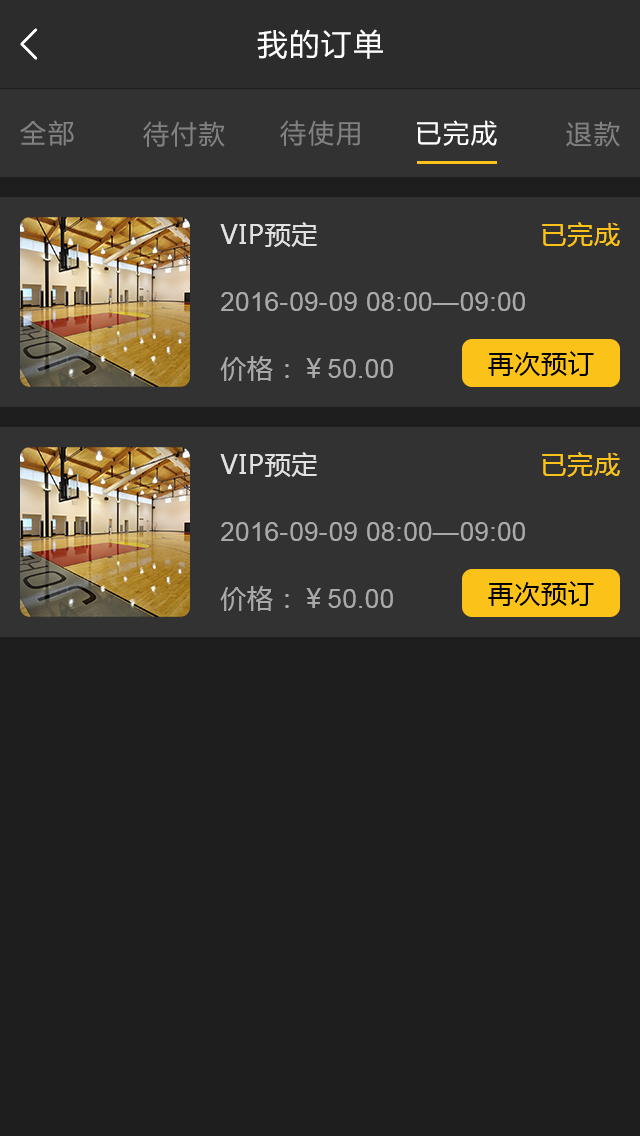
<style>
.page{position:relative;width:640px;height:1136px;background:#1e1e1e}
.page>*{position:absolute;margin:0}
.t1{font:30px "MicrosoftYaHei";letter-spacing:0.07em;color:#ffffff}
.t2{font:26px "MicrosoftYaHei";letter-spacing:0.07em;color:#818181}
.t3{font:26px "MicrosoftYaHei";letter-spacing:0.07em;color:#ffffff}
.t4{font:26px "MicrosoftYaHei";letter-spacing:0.03em;color:#e1e1e1}
.t5{font:26px "MicrosoftYaHei";letter-spacing:0.03em;color:#fbc219}
.t6{font:26px "ArialMT";letter-spacing:0.03em;color:#a9a9a9}
.t7{font:26px "MicrosoftYaHei";letter-spacing:0.03em;color:#010101}
.t8{font:26px "MicrosoftYaHei";letter-spacing:0.03em;color:#a9a9a9}
</style>
<div class="page">
<p class="t1" style="left:257px;top:29px;width:126px;height:30px">我的订单</p>
<p class="t2" style="left:20px;top:120px;width:54px;height:26px">全部</p>
<p class="t2" style="left:143px;top:121px;width:82px;height:26px">待付款</p>
<p class="t2" style="left:280px;top:120px;width:80px;height:26px">待使用</p>
<p class="t3" style="left:417px;top:120px;width:80px;height:26px">已完成</p>
<p class="t2" style="left:566px;top:121px;width:54px;height:26px">退款</p>
<p class="t4" style="left:220px;top:222px;width:97px;height:25px">VIP预定</p>
<p class="t5" style="left:542px;top:222px;width:78px;height:25px">已完成</p>
<p class="t6" style="left:221px;top:292px;width:304px;height:19px">2016-09-09 08:00—09:00</p>
<p class="t7" style="left:488px;top:351px;width:106px;height:25px">再次预订</p>
<p class="t6" style="left:220px;top:355px;width:173px;height:26px"><span class="t8">价格：￥</span>50.00</p>
<p class="t4" style="left:220px;top:452px;width:97px;height:25px">VIP预定</p>
<p class="t5" style="left:542px;top:452px;width:78px;height:25px">已完成</p>
<p class="t6" style="left:221px;top:522px;width:304px;height:19px">2016-09-09 08:00—09:00</p>
<p class="t7" style="left:488px;top:581px;width:106px;height:25px">再次预订</p>
<p class="t6" style="left:220px;top:585px;width:173px;height:26px"><span class="t8">价格：￥</span>50.00</p>
</div>
